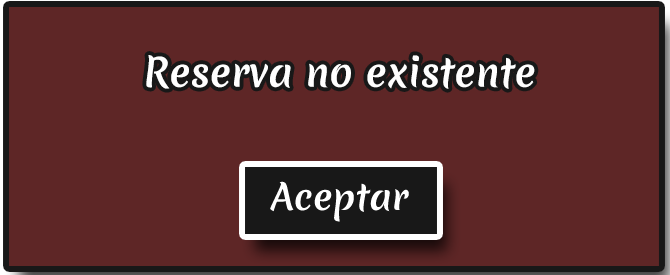
<style>
.page{position:relative;width:670px;height:275px;background:#5e2626}
.page>*{position:absolute;margin:0}
.t1{font:38.5px "MeriendaOne-Regular";color:#ffffff}
</style>
<div class="page">
<p class="t1" style="left:146px;top:55px;width:389px;height:34px">Reserva no existente</p>
</div>
